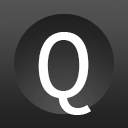
<style>
.page{position:relative;width:128px;height:128px}
.page>*{position:absolute;margin:0}
.t1{font:100px "Consolas";color:#ffffff}
</style>
<div class="page">
<p class="t1" style="left:38px;top:32px;width:53px;height:83px">Q</p>
</div>
